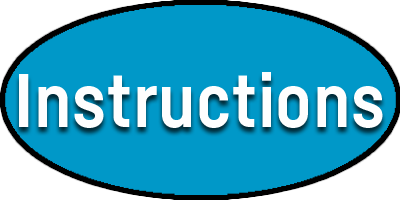
<style>
.page{position:relative;width:400px;height:200px;background:#0098c8}
.page>*{position:absolute;margin:0}
.t1{font:75px "Fabrikat-Bold";letter-spacing:0.01em;color:#fefefe}
</style>
<div class="page">
<p class="t1" style="left:19px;top:72px;width:364px;height:56px">Instructions</p>
</div>
